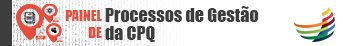
<style>
.page{position:relative;width:345px;height:46px;background:#ffffff}
.page>*{position:absolute;margin:0}
.t1{font:18px/18px "Impact";color:#3d3d3d}
.t2{font:14px "Impact";color:#e74c3c}
</style>
<div class="page">
<p class="t1" style="left:105px;top:6px;width:154px;height:36px">Processos de Gestão <br>da CPQ</p>
<p class="t2" style="left:65px;top:10px;width:37px;height:28px;text-align:right">PAINEL<br> DE</p>
</div>
